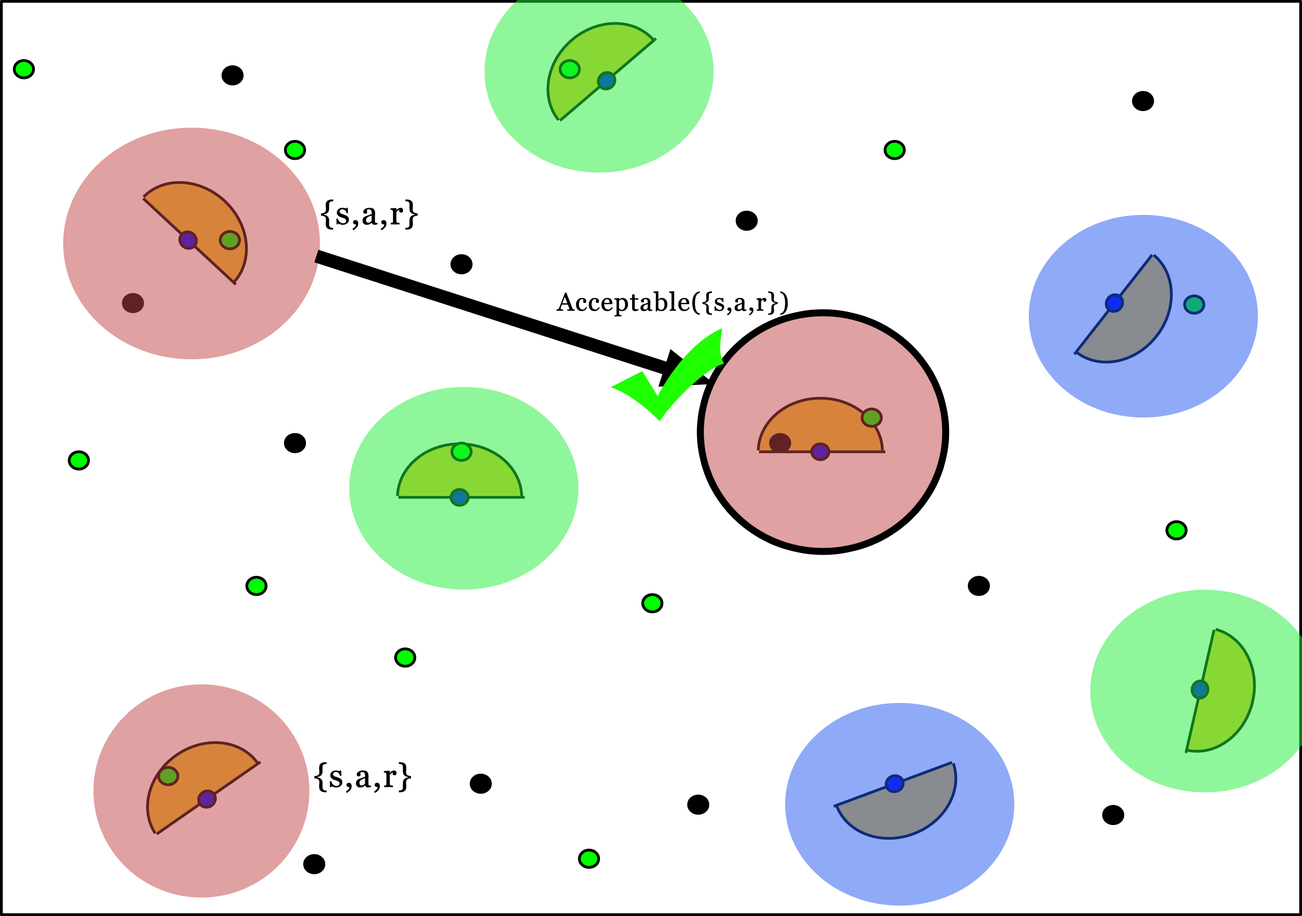
<style>
.page{position:relative;width:1302px;height:916px;background:#ffffff}
.page>*{position:absolute;margin:0}
.t1{font:32.9px "Georgia";letter-spacing:0.015em;color:#000000;font-weight:bold}
.t2{font:25.6px "Georgia";letter-spacing:0.015em;color:#000000;font-weight:bold}
</style>
<div class="page">
<p class="t1" style="left:321px;top:199px;width:97px;height:31px">{s,a,r}</p>
<p class="t2" style="left:556px;top:291px;width:232px;height:25px">Acceptable({s,a,r})</p>
<p class="t1" style="left:314px;top:762px;width:97px;height:31px">{s,a,r}</p>
</div>
